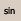
<style>
.page{position:relative;width:21px;height:21px;background:#d9cdc1}
.page>*{position:absolute;margin:0}
.t1{font:9px "Tahoma";color:#000000}
</style>
<div class="page">
<p class="t1" style="left:4px;top:7px;width:11px;height:8px">sin</p>
</div>
